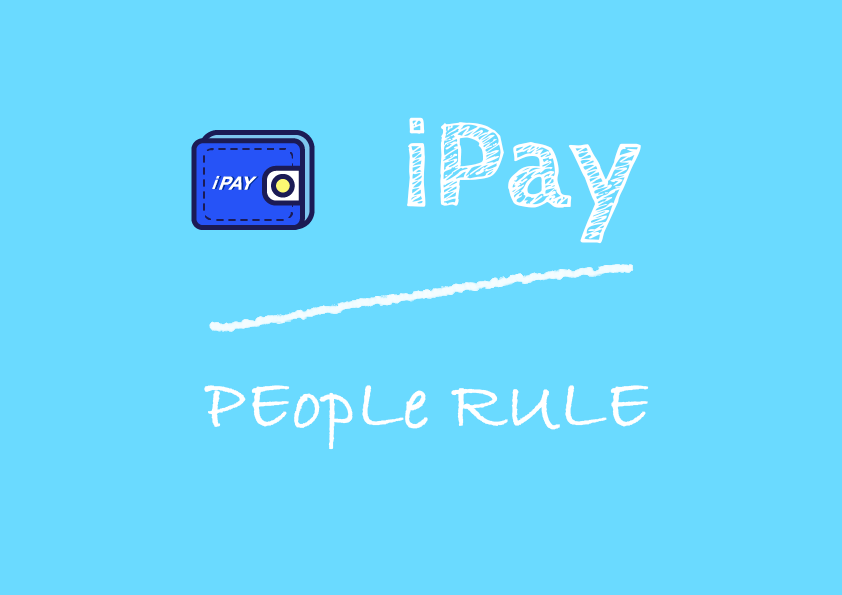
<style>
.page{position:relative;width:842px;height:595px;background:#6adaff}
.page>*{position:absolute;margin:0}
.t1{font:128px "CabinSketch-Bold";color:#ffffff}
.t2{font:72px "BradleyHandITC";color:#ffffff;font-weight:bold}
</style>
<div class="page">
<p class="t1" style="left:407px;top:117px;width:234px;height:127px">iPay</p>
<p class="t2" style="left:204px;top:385px;width:445px;height:65px">PEopLe RULE</p>
</div>
